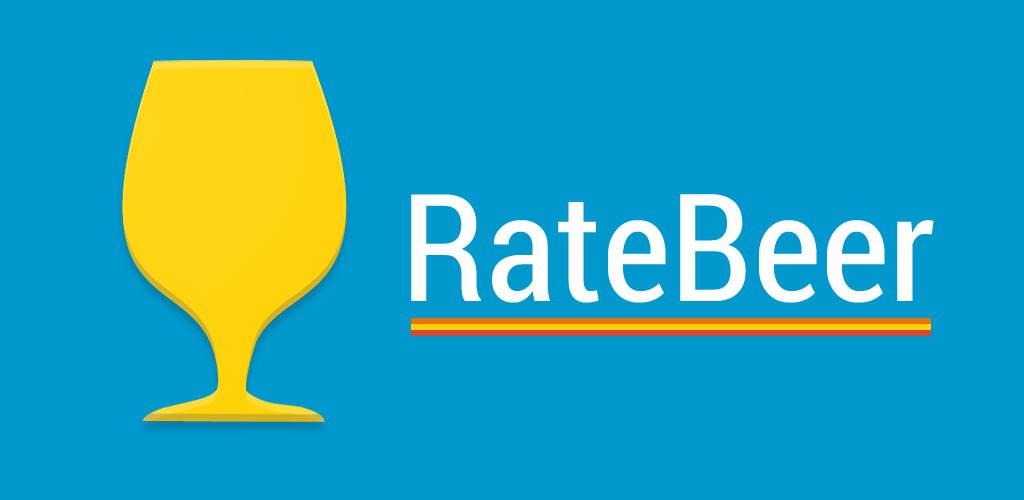
<style>
.page{position:relative;width:1024px;height:500px;background:#0098cd}
.page>*{position:absolute;margin:0}
.t1{font:150px "RobotoCondensed-Regular";color:#ffffff}
</style>
<div class="page">
<p class="t1" style="left:411px;top:194px;width:523px;height:109px">RateBeer</p>
</div>
